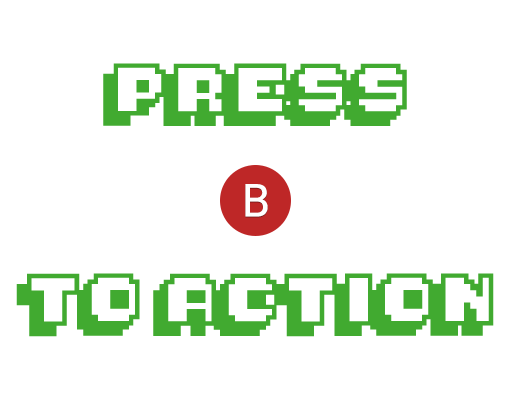
<style>
.page{position:relative;width:510px;height:400px;background:#ffffff}
.page>*{position:absolute;margin:0}
.t1{font:40px/210px "Pixelmania";color:#41aa30}
.t2{font:45.3px "Roboto-Regular";color:#ffffff}
</style>
<div class="page">
<p class="t1" style="left:16px;top:63px;width:478px;height:274px;text-align:center">PRESS<br>TO ACTION</p>
<p class="t2" style="left:245px;top:184px;width:23px;height:33px">B</p>
</div>
